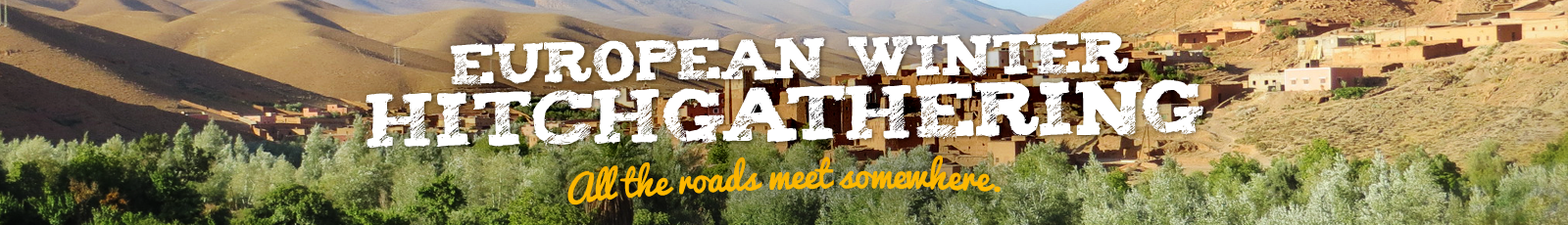
<style>
.page{position:relative;width:1568px;height:225px}
.page>*{position:absolute;margin:0}
.t1{font:46.2px/62.1px "Tiza";letter-spacing:-0.01em;color:#ffffff;text-transform:uppercase}
.t2{font:62.2px/62.1px "Tiza";letter-spacing:-0.01em;color:#ffffff;text-transform:uppercase}
.t3{font:35.9px "Pacifico";color:#ffba00}
</style>
<div class="page">
<p class="t1" style="left:366px;top:31px;width:838px;height:117px;text-align:center;rotate:-1deg">European winter <br><span class="t2">Hitchgathering</span></p>
<p class="t3" style="left:567px;top:156px;width:434px;height:50px;rotate:-2deg">All the roads meet somewhere.</p>
</div>
